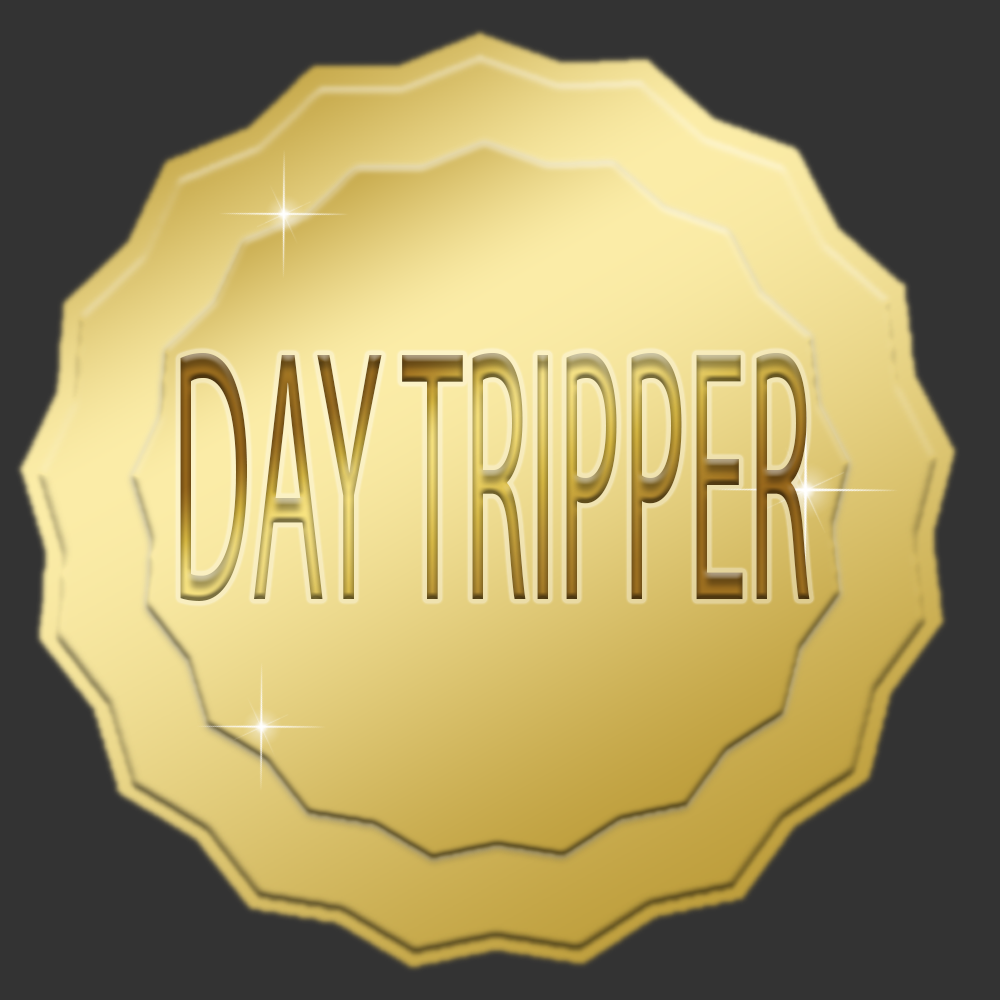
<style>
.page{position:relative;width:1000px;height:1000px;background:#333333}
.page>*{position:absolute;margin:0}
.t1{font:361.4px "MyriadPro-Regular";scale:0.34 1}
</style>
<div class="page">
<p class="t1" style="left:180px;top:352px;width:630px;height:249px">DAY TRIPPER</p>
</div>
